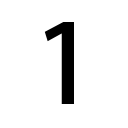
<style>
.page{position:relative;width:128px;height:128px;background:#ffffff}
.page>*{position:absolute;margin:0}
.t1{font:26.2px "AdobeHeitiStd-Regular";color:#000000}
</style>
<div class="page">
<p class="t1" style="left:44px;top:22px;width:30px;height:82px">1</p>
</div>
